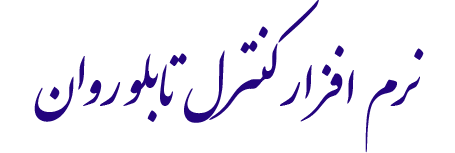
<style>
.page{position:relative;width:455px;height:153px;background:#ffffff}
.page>*{position:absolute;margin:0}
.t1{font:92.1px "IranNastaliq";color:#24047e;scale:1.03 1}
</style>
<div class="page">
<p class="t1" style="left:34px;top:0px;width:390px;height:153px">نرم افزار کنترل تابلو روان</p>
</div>
